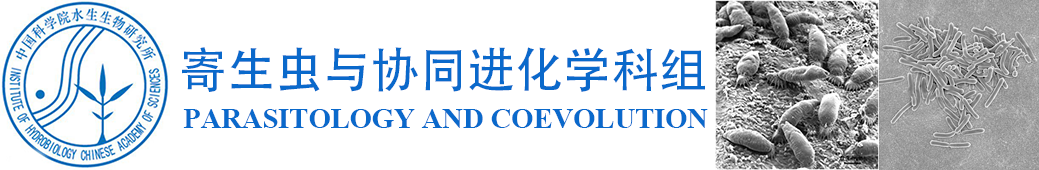
<style>
.page{position:relative;width:1039px;height:170px;background:#ffffff}
.page>*{position:absolute;margin:0}
.t1{font:48px "AdobeHeitiStd-Regular";color:#0a69cb}
.t2{font:28.5px "TimesNewRomanPS-BoldMT";color:#0a69cb}
</style>
<div class="page">
<p class="t1" style="left:182px;top:47px;width:523px;height:45px">寄生虫与协同进化学科组</p>
<p class="t2" style="left:183px;top:109px;width:525px;height:19px">PARASITOLOGY AND COEVOLUTION</p>
</div>
